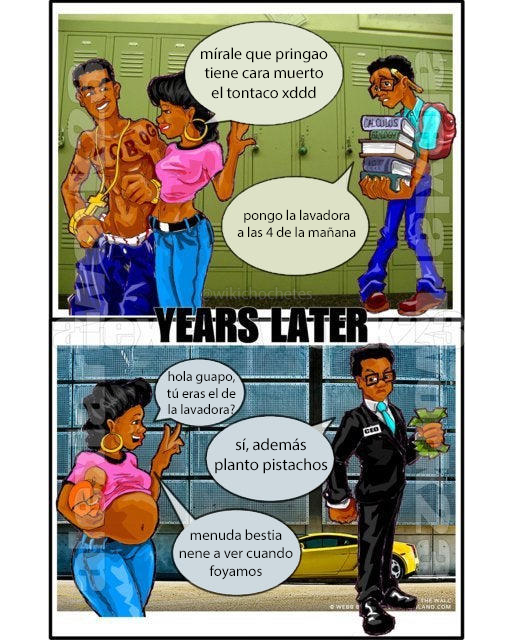
<style>
.page{position:relative;width:513px;height:640px;background:#ffffff}
.page>*{position:absolute;margin:0}
.t1{font:16.1px "MyriadPro-Regular";color:#000000}
.t2{font:14.3px "MyriadPro-Regular";color:#000000}
.t3{font:16.8px "MyriadPro-Regular"}
.t4{font:13.8px "MyriadPro-Regular";color:#000000}
.t5{font:16.6px "MyriadPro-Regular";color:#000000}
.t6{font:14.9px "MyriadPro-Regular";color:#000000}
</style>
<div class="page">
<p class="t1" style="left:201px;top:47px;width:127px;height:52px;text-align:center">mírale que pringao<br>tiene cara muerto<br>el tontaco xddd</p>
<p class="t2" style="left:237px;top:209px;width:119px;height:28px;text-align:center">pongo la lavadora<br>a las 4 de la mañana</p>
<p class="t3" style="left:201px;top:287px;width:111px;height:14px">@wikichochetes</p>
<p class="t4" style="left:167px;top:371px;width:69px;height:43px;text-align:center">hola guapo,<br>tú eras el de<br>la lavadora?</p>
<p class="t5" style="left:215px;top:438px;width:113px;height:36px;text-align:center">sí, además<br>planto pistachos</p>
<p class="t6" style="left:179px;top:529px;width:114px;height:51px;text-align:center">menuda bestia<br>nene a ver cuando<br>foyamos</p>
</div>
